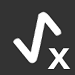
<style>
.page{position:relative;width:75px;height:75px;background:#333333}
.page>*{position:absolute;margin:0}
.t1{font:42.9px "AvenirNext-DemiBold";letter-spacing:-0.075em;color:#ffffff}
</style>
<div class="page">
<p class="t1" style="left:47px;top:48px;width:24px;height:21px">x</p>
</div>
